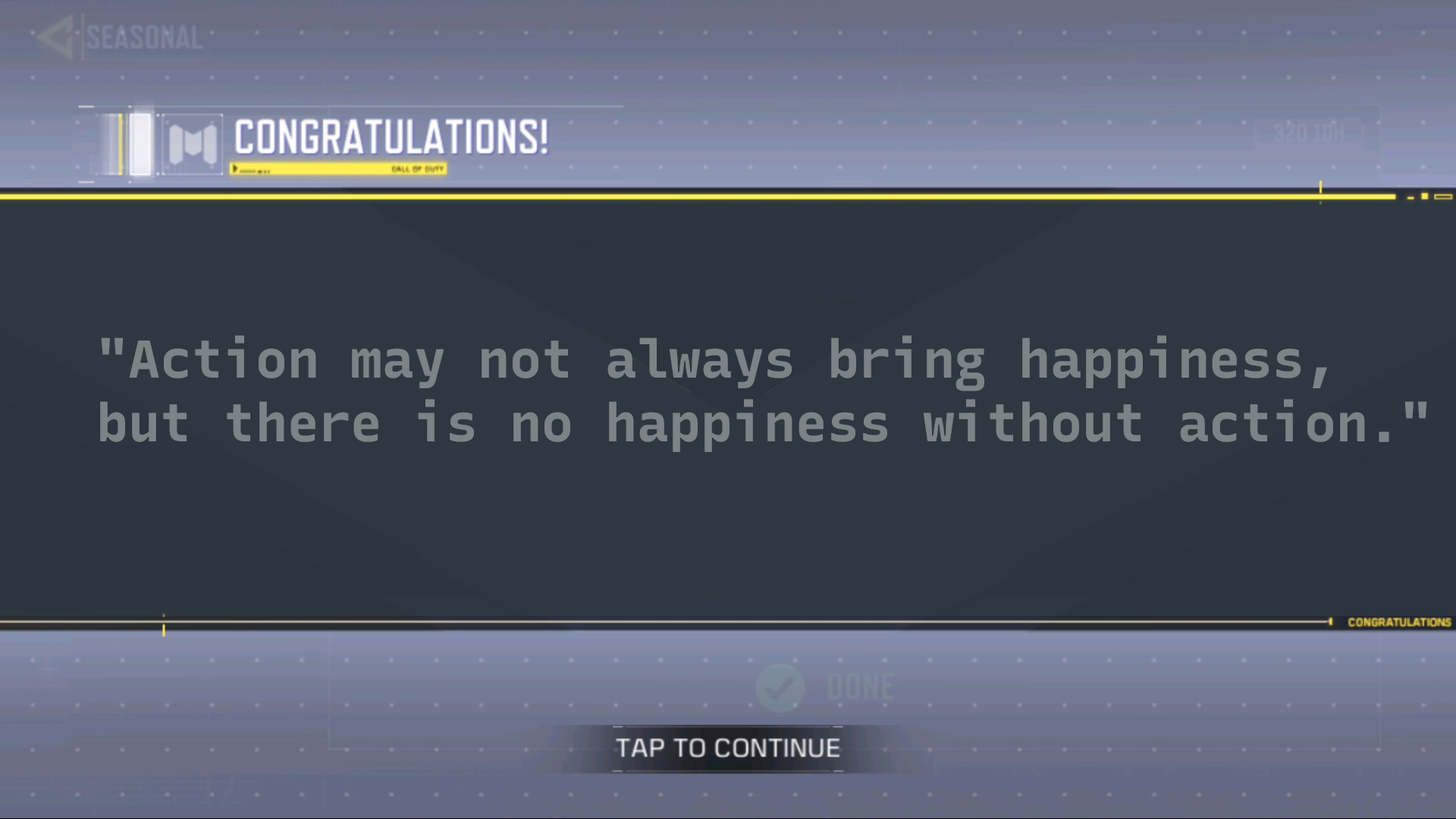
<style>
.page{position:relative;width:1456px;height:819px;background:#2f3740}
.page>*{position:absolute;margin:0}
.t1{font:52.9px "RecursiveMonospace-Bold";color:#7c8387}
</style>
<div class="page">
<p class="t1" style="left:100px;top:335px;width:1327px;height:117px">"Action may not always bring happiness, <br>but there is no happiness without action."</p>
</div>
